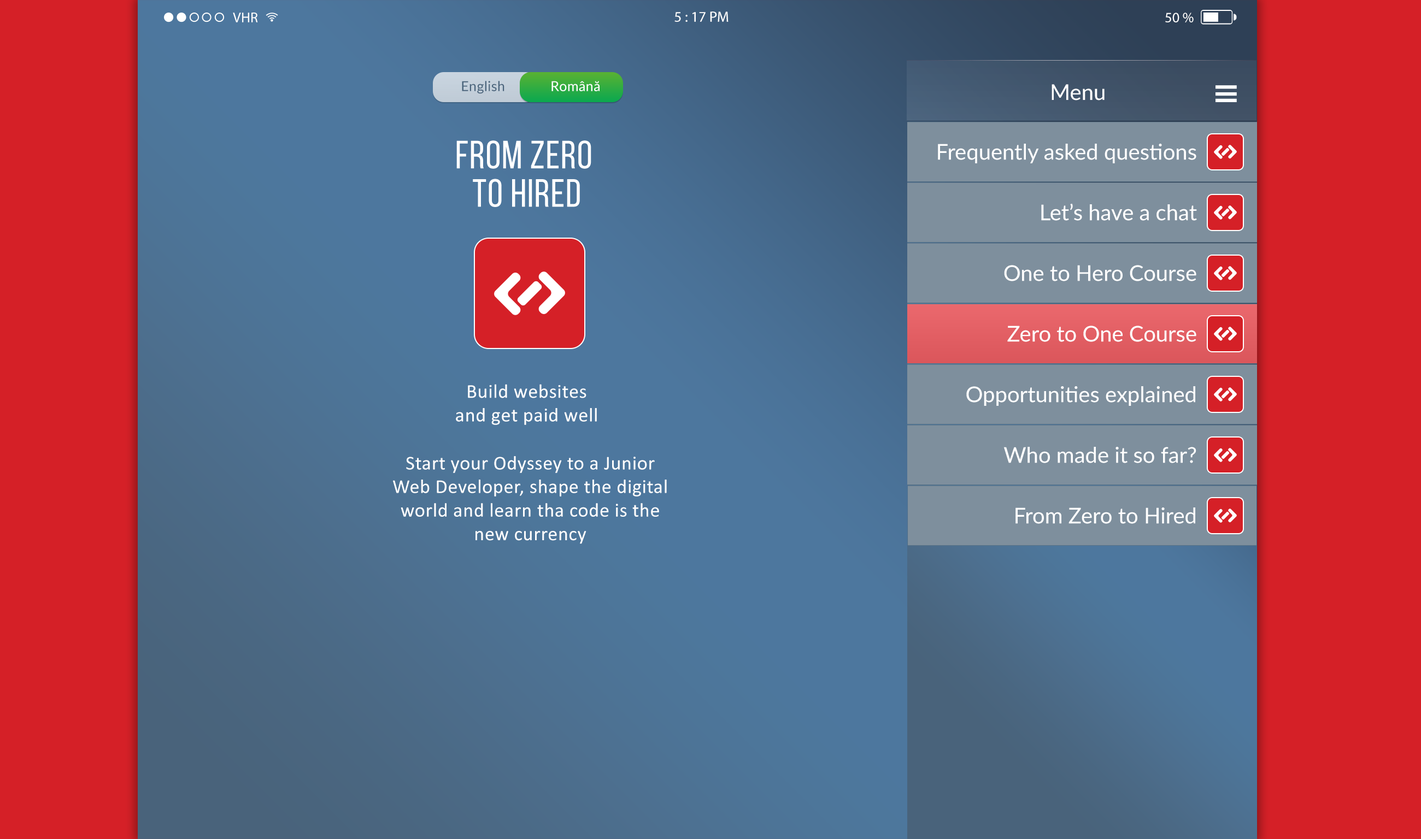
<style>
.page{position:relative;width:1421px;height:839px;background:#d52027}
.page>*{position:absolute;margin:0}
.t1{font:14.3px "MyriadPro-Regular";color:#ffffff}
.t2{font:14.8px "MyriadPro-Regular";color:#ffffff}
.t3{font:13.6px "Lato-Regular";letter-spacing:0.02em;color:#49637b}
.t4{font:13.6px "Lato-Regular";letter-spacing:0.02em;color:#ffffff}
.t5{font:21.9px "Lato-Regular";color:#ffffff}
.t6{font:39.3px/38.3px "BebasNeueRegular";letter-spacing:0.02em;color:#ffffff;text-transform:uppercase}
.t7{font:19.7px "Calibri";letter-spacing:0.02em;color:#ffffff}
</style>
<div class="page">
<p class="t1" style="left:233px;top:13px;width:25px;height:9px">VHR</p>
<p class="t2" style="left:674px;top:11px;width:54px;height:11px">5 : 17 PM</p>
<p class="t1" style="left:1165px;top:13px;width:28px;height:9px">50 %</p>
<p class="t3" style="left:462px;top:81px;width:42px;height:13px">English</p>
<p class="t4" style="left:551px;top:81px;width:48px;height:10px">Română</p>
<p class="t5" style="left:1051px;top:84px;width:53px;height:17px">Menu</p>
<p class="t6" style="left:456px;top:140px;width:135px;height:67px;text-align:center">from zero <br>to hired</p>
<p class="t5" style="left:938px;top:144px;width:258px;height:19px">Frequently asked questions</p>
<p class="t5" style="left:1041px;top:203px;width:156px;height:18px">Let’s have a chat</p>
<p class="t5" style="left:1004px;top:265px;width:192px;height:16px">One to Hero Course</p>
<p class="t5" style="left:1007px;top:326px;width:189px;height:16px">Zero to One Course</p>
<p class="t7" style="left:456px;top:384px;width:141px;height:41px;text-align:center">Build websites<br>and get paid well</p>
<p class="t5" style="left:966px;top:386px;width:229px;height:20px">Opportunities explained</p>
<p class="t5" style="left:1003px;top:447px;width:193px;height:16px">Who made it so far?</p>
<p class="t7" style="left:393px;top:456px;width:274px;height:88px;text-align:center">Start your Odyssey to a Junior Web Developer, shape the digital world and learn tha code is the new currency</p>
<p class="t5" style="left:1015px;top:508px;width:180px;height:16px">From Zero to Hired</p>
</div>
